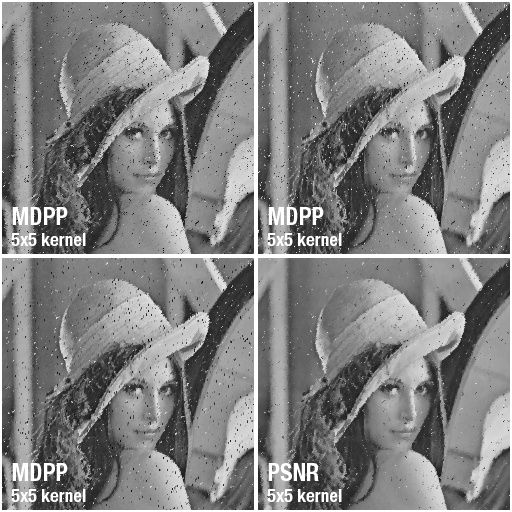
<style>
.page{position:relative;width:512px;height:512px}
.page>*{position:absolute;margin:0}
.t1{font:18px "HelveticaNeueLTPro-BdCn";color:#ffffff}
.t2{font:24px "HelveticaNeueLTPro-BdCn";color:#ffffff}
</style>
<div class="page">
<p class="t1" style="left:11px;top:207px;width:75px;height:39px;text-align:justify"><span class="t2">MDPP<br></span>5x5 kernel</p>
<p class="t1" style="left:267px;top:207px;width:75px;height:39px;text-align:justify"><span class="t2">MDPP<br></span>5x5 kernel</p>
<p class="t1" style="left:11px;top:463px;width:75px;height:39px;text-align:justify"><span class="t2">MDPP<br></span>5x5 kernel</p>
<p class="t1" style="left:267px;top:463px;width:75px;height:39px;text-align:justify"><span class="t2">PSNR<br></span>5x5 kernel</p>
</div>
